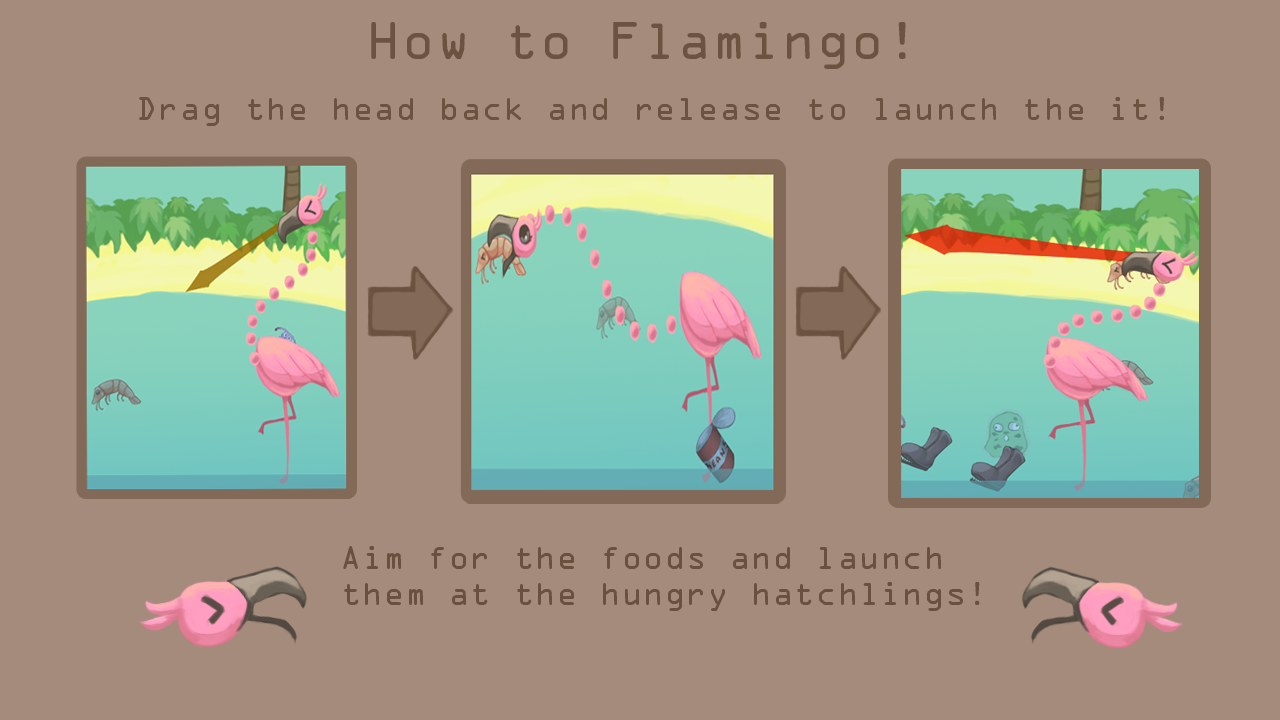
<style>
.page{position:relative;width:1280px;height:720px;background:#a48b7c}
.page>*{position:absolute;margin:0}
.t1{font:48px "OCRAStd";color:#6c5341}
.t2{font:30px "OCRAStd";color:#6c5341}
.t3{font:30px "OCRAStd";color:#6a513f}
</style>
<div class="page">
<p class="t1" style="left:371px;top:22px;width:535px;height:47px">How to Flamingo!</p>
<p class="t2" style="left:139px;top:97px;width:1025px;height:29px">Drag the head back and release to launch the it!</p>
<p class="t3" style="left:343px;top:546px;width:637px;height:65px">Aim for the foods and launch them at the hungry hatchlings!</p>
</div>
